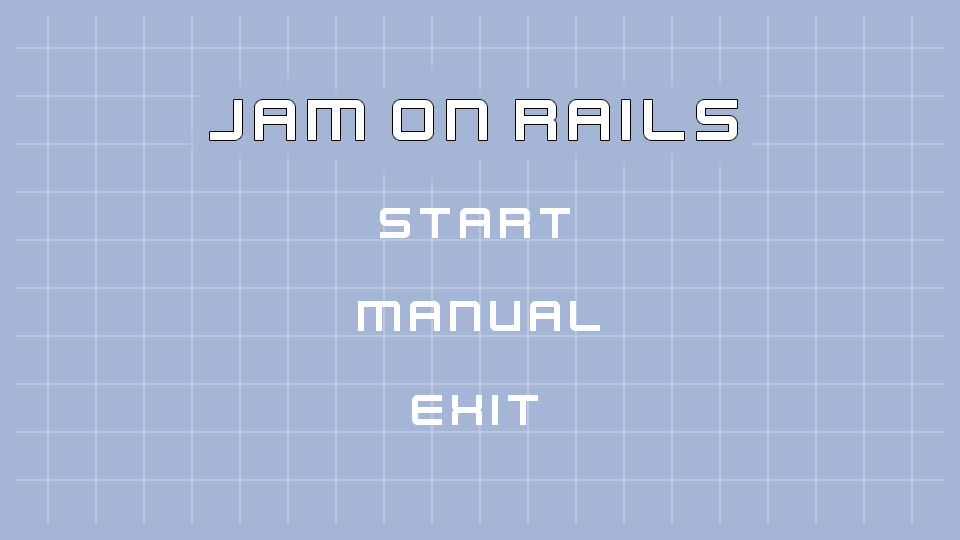
<style>
.page{position:relative;width:960px;height:540px;background:#a4b5d5}
.page>*{position:absolute;margin:0}
.t1{font:64px "Kenney-Future";color:#ffffff}
.t2{font:48px "Kenney-Future";color:#ffffff}
</style>
<div class="page">
<p class="t1" style="left:210px;top:100px;width:527px;height:40px">Jam on Rails</p>
<p class="t2" style="left:380px;top:208px;width:190px;height:30px">start</p>
<p class="t2" style="left:358px;top:301px;width:242px;height:30px">manual</p>
<p class="t2" style="left:412px;top:395px;width:126px;height:30px">exit</p>
</div>
